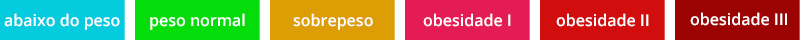
<style>
.page{position:relative;width:800px;height:40px}
.page>*{position:absolute;margin:0}
.t1{font:16px "OpenSans-SemiBold";color:#ffffff}
</style>
<div class="page">
<p class="t1" style="left:4px;top:13px;width:116px;height:17px">abaixo do peso</p>
<p class="t1" style="left:150px;top:13px;width:95px;height:17px">peso normal</p>
<p class="t1" style="left:293px;top:13px;width:80px;height:17px">sobrepeso</p>
<p class="t1" style="left:423px;top:13px;width:88px;height:14px">obesidade I</p>
<p class="t1" style="left:556px;top:13px;width:93px;height:14px">obesidade II</p>
<p class="t1" style="left:690px;top:12px;width:97px;height:14px">obesidade III</p>
</div>
